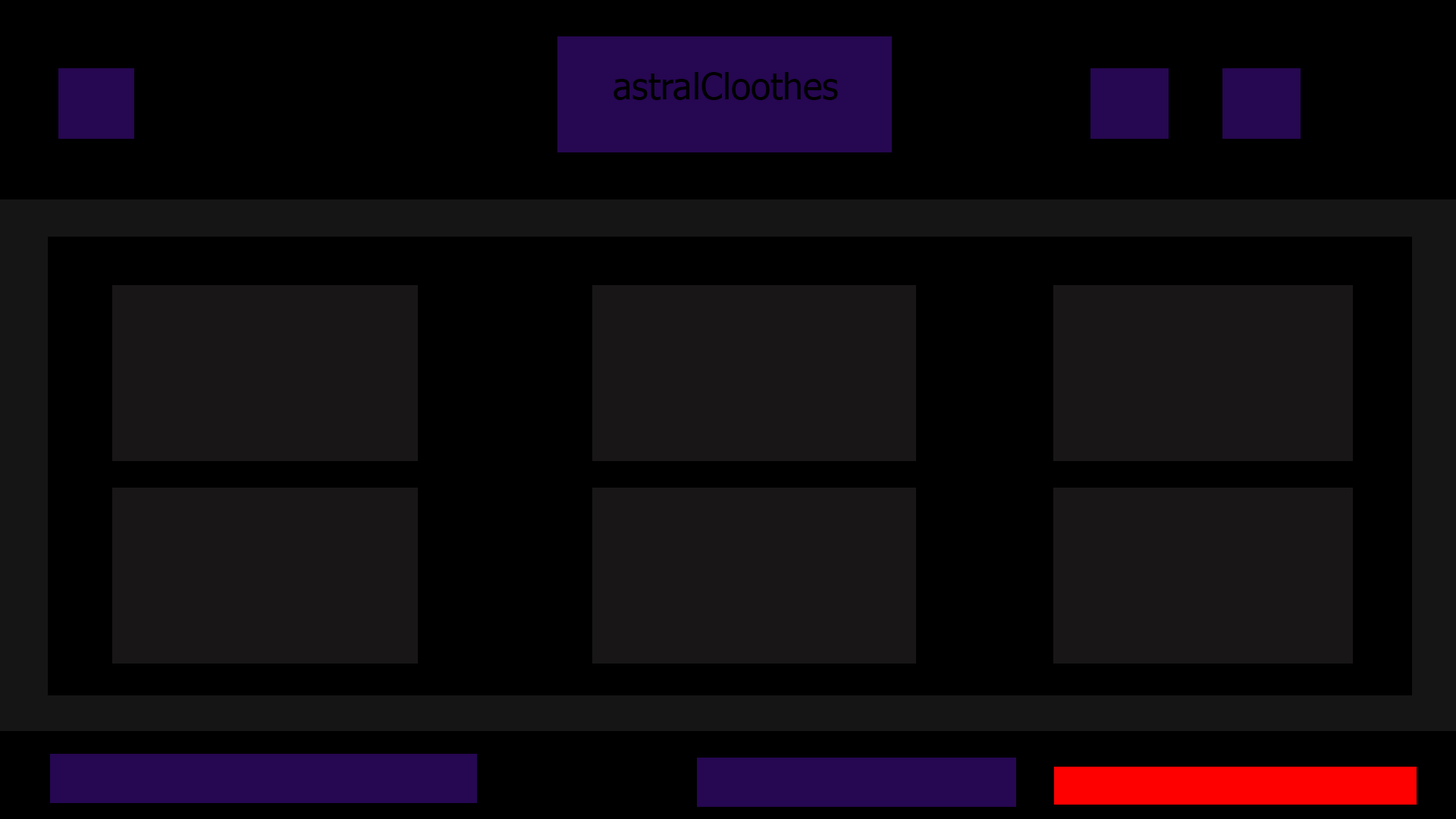
<style>
.page{position:relative;width:1456px;height:819px;background:#000000}
.page>*{position:absolute;margin:0}
.t1{font:36.3px "Tahoma";color:#000000}
</style>
<div class="page">
<p class="t1" style="left:613px;top:72px;width:225px;height:28px">astralCloothes</p>
</div>
